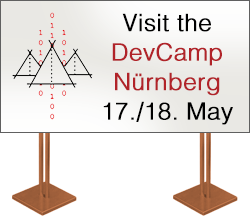
<style>
.page{position:relative;width:250px;height:216px;background:#ffffff}
.page>*{position:absolute;margin:0}
.t1{font:24px/29.5px "Helvetica-Light";color:#b12329;font-weight:bold}
.t2{font:24px/29.5px "Helvetica-Light";color:#000000;font-weight:bold}
</style>
<div class="page">
<p class="t1" style="left:103px;top:13px;width:130px;height:112px;text-align:center"><span class="t2">Visit the<br></span>DevCamp<br>Nürnberg<br><span class="t2">17./18. May</span></p>
</div>
